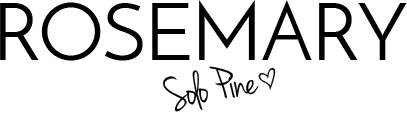
<style>
.page{position:relative;width:407px;height:113px;background:#ffffff}
.page>*{position:absolute;margin:0}
.t1{font:80px "JosefinSans";letter-spacing:-0.025em;color:#000000}
.t2{font:48px "JennaSue";letter-spacing:-0.025em;color:#010101}
.t3{font:40px "JennaSue";letter-spacing:-0.025em;color:#010101}
</style>
<div class="page">
<p class="t1" style="left:0px;top:0px;width:407px;height:61px">ROSEMARY</p>
<p class="t2" style="left:162px;top:66px;width:114px;height:46px;rotate:-10deg">Solo Pine<span class="t3">^</span></p>
</div>
